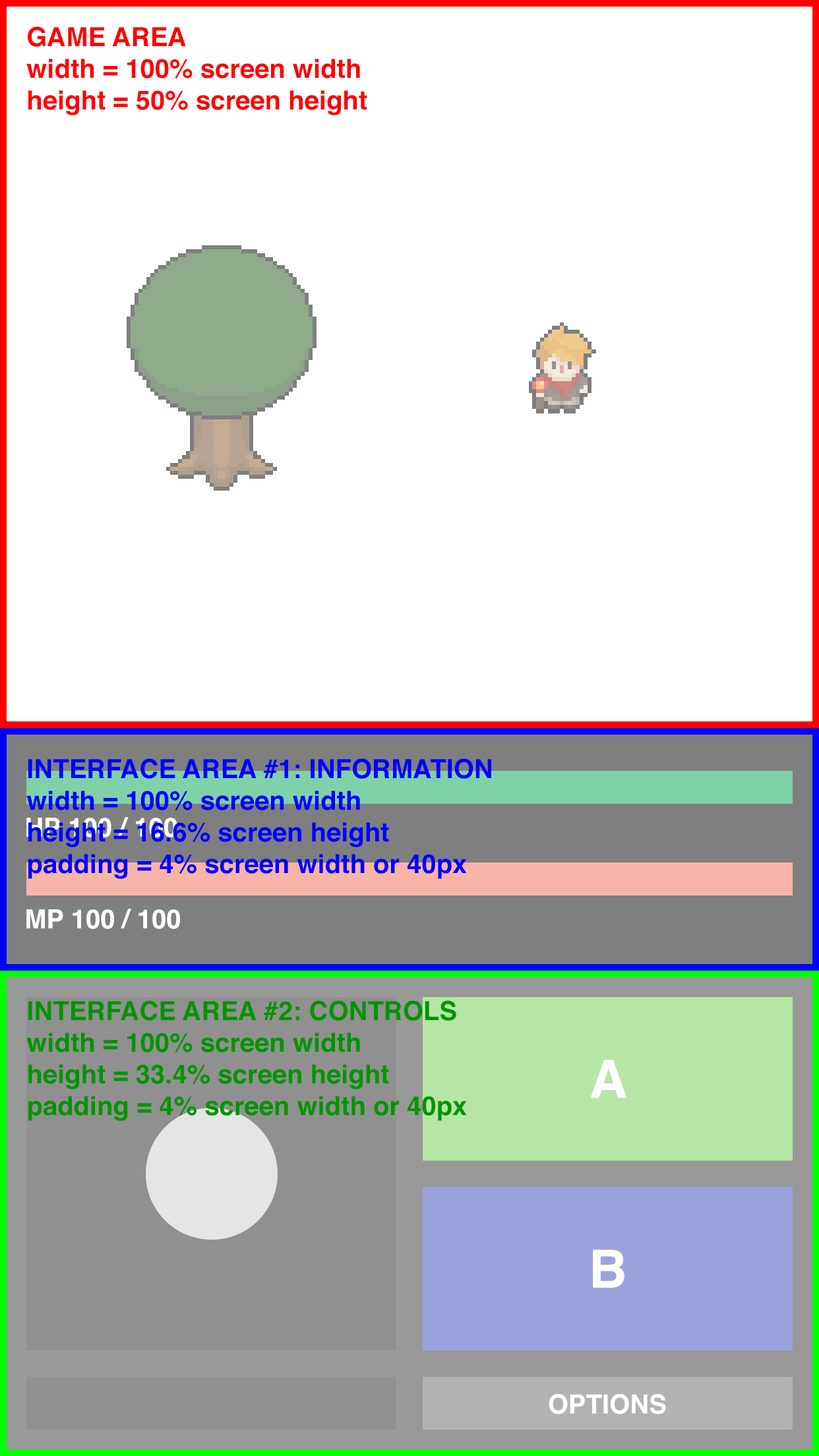
<style>
.page{position:relative;width:819px;height:1456px;background:#ffffff}
.page>*{position:absolute;margin:0}
.t1{font:26.4px "Helvetica-Bold";color:#ff0000}
.t2{font:26.4px "Helvetica-Bold";color:#0000ff}
.t3{font:26.4px "Helvetica-Bold";color:#ffffff}
.t4{font:26.4px "Helvetica-Bold";color:#009600}
.t5{font:52.8px "Helvetica-Bold";color:#ffffff}
</style>
<div class="page">
<p class="t1" style="left:26px;top:26px;width:341px;height:89px">GAME AREA<br>width = 100% screen width<br>height = 50% screen height</p>
<p class="t2" style="left:26px;top:758px;width:465px;height:121px">INTERFACE AREA #1: INFORMATION<br>width = 100% screen width<br>height = 16.6% screen height<br>padding = 4% screen width or 40px</p>
<p class="t3" style="left:26px;top:817px;width:151px;height:20px">HP 100 / 100</p>
<p class="t3" style="left:26px;top:909px;width:154px;height:20px">MP 100 / 100</p>
<p class="t4" style="left:26px;top:1000px;width:441px;height:121px">INTERFACE AREA #2: CONTROLS<br>width = 100% screen width<br>height = 33.4% screen height<br>padding = 4% screen width or 40px</p>
<p class="t5" style="left:590px;top:1060px;width:36px;height:38px">A</p>
<p class="t5" style="left:593px;top:1250px;width:31px;height:38px">B</p>
<p class="t3" style="left:549px;top:1394px;width:117px;height:20px">OPTIONS</p>
</div>
